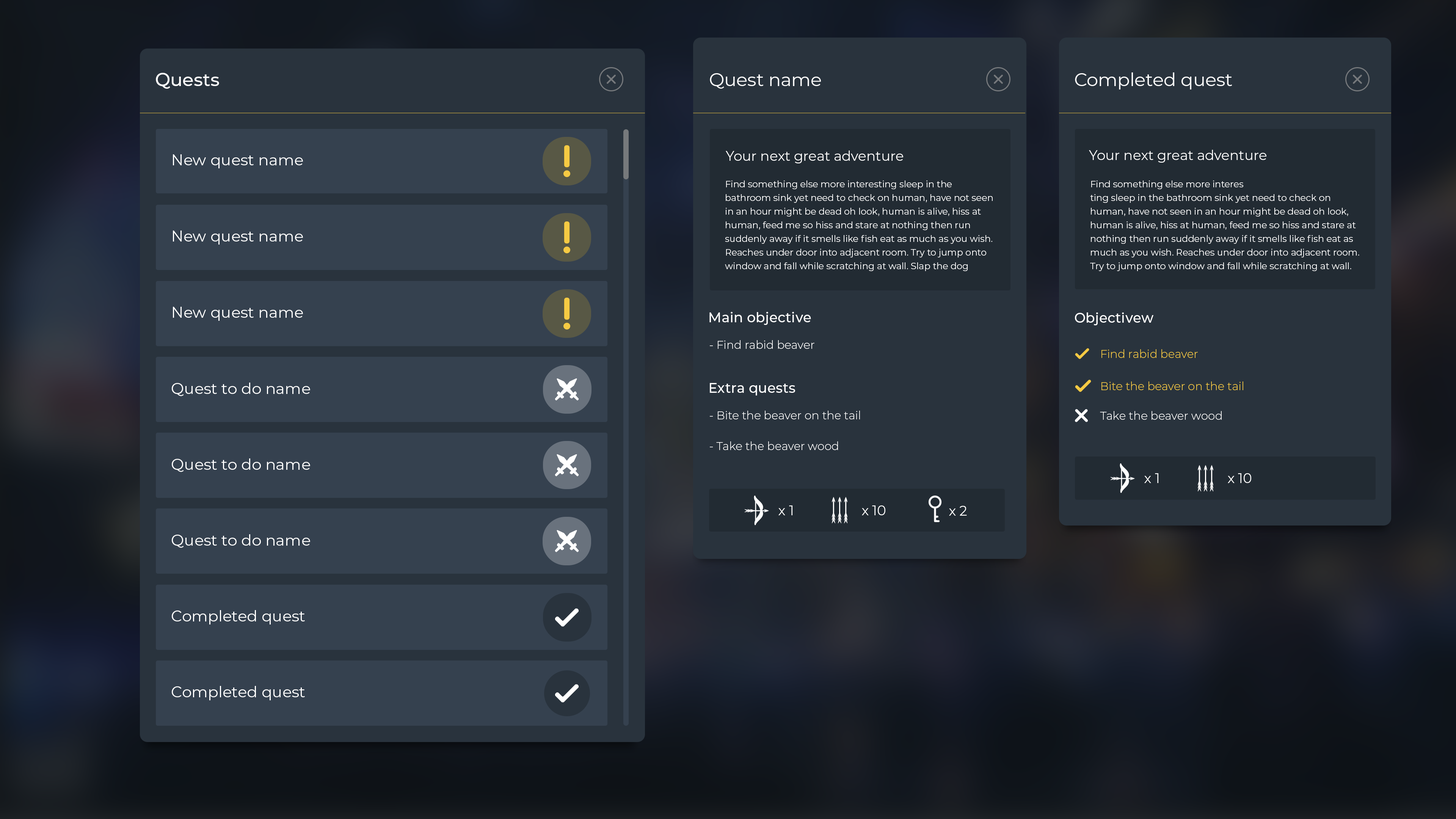
<style>
.page{position:relative;width:1456px;height:819px;background:#29333d}
.page>*{position:absolute;margin:0}
.t1{font:18.2px "Montserrat-Medium";color:#ffffff}
.t2{font:18.2px "Montserrat-Regular";color:#ffffff}
.t3{font:13.6px "Montserrat-Regular";color:#ffffff}
.t4{font:15.5px "Montserrat-Regular";color:#ffffff}
.t5{font:9.1px/13.6px "Montserrat-Regular";color:#ffffff}
.t6{font:13.6px "Montserrat-Medium";letter-spacing:0.01em;color:#ffffff}
.t7{font:11.4px "Montserrat-Light";color:#ffffff}
.t8{font:11.4px "Montserrat-Light";color:#f6ca43}
.t9{font:13.7px "Montserrat-Regular";color:#ffffff}
</style>
<div class="page">
<p class="t1" style="left:156px;top:73px;width:63px;height:16px">Quests</p>
<p class="t2" style="left:710px;top:73px;width:111px;height:16px">Quest name</p>
<p class="t2" style="left:1075px;top:72px;width:157px;height:17px">Completed quest</p>
<p class="t3" style="left:1089px;top:150px;width:177px;height:13px">Your next great adventure</p>
<p class="t4" style="left:173px;top:154px;width:130px;height:14px">New quest name</p>
<p class="t3" style="left:726px;top:151px;width:177px;height:12px">Your next great adventure</p>
<p class="t5" style="left:725px;top:180px;width:268px;height:91px">Find something else more interesting sleep in the bathroom sink yet need to check on human, have not seen in an hour might be dead oh look, human is alive, hiss at human, feed me so hiss and stare at nothing then run suddenly away if it smells like fish eat as much as you wish. Reaches under door into adjacent room. Try to jump onto window and fall while scratching at wall. Slap the dog because cats rule spill litter box, scratch at owner, destroy all furniture, especially couch hack up furballs have secret plans.</p>
<p class="t5" style="left:1090px;top:180px;width:269px;height:91px">Find something else more interes<br>ting sleep in the bathroom sink yet need to check on human, have not seen in an hour might be dead oh look, human is alive, hiss at human, feed me so hiss and stare at nothing then run suddenly away if it smells like fish eat as much as you wish. Reaches under door into adjacent room. Try to jump onto window and fall while scratching at wall. Slap the dog because cats rule spill litter box, scratch at owner, destroy all furniture, especially couch hack up furballs have secret plans.</p>
<p class="t4" style="left:173px;top:231px;width:130px;height:14px">New quest name</p>
<p class="t4" style="left:173px;top:307px;width:130px;height:14px">New quest name</p>
<p class="t6" style="left:709px;top:312px;width:102px;height:13px">Main objective</p>
<p class="t6" style="left:1075px;top:312px;width:78px;height:13px">Objectivew</p>
<p class="t7" style="left:710px;top:340px;width:104px;height:9px">- Find rabid beaver</p>
<p class="t8" style="left:1101px;top:349px;width:97px;height:9px">Find rabid beaver</p>
<p class="t4" style="left:172px;top:383px;width:138px;height:13px">Quest to do name</p>
<p class="t6" style="left:710px;top:383px;width:85px;height:12px">Extra quests</p>
<p class="t8" style="left:1101px;top:381px;width:142px;height:9px">Bite the beaver on the tail</p>
<p class="t7" style="left:710px;top:411px;width:150px;height:8px">- Bite the beaver on the tail</p>
<p class="t7" style="left:1100px;top:411px;width:122px;height:9px">Take the beaver wood</p>
<p class="t7" style="left:710px;top:441px;width:128px;height:9px">- Take the beaver wood</p>
<p class="t4" style="left:172px;top:458px;width:138px;height:14px">Quest to do name</p>
<p class="t9" style="left:1144px;top:473px;width:14px;height:10px">x 1</p>
<p class="t9" style="left:1228px;top:473px;width:23px;height:10px">x 10</p>
<p class="t9" style="left:778px;top:505px;width:14px;height:10px">x 1</p>
<p class="t9" style="left:862px;top:505px;width:23px;height:10px">x 10</p>
<p class="t9" style="left:949px;top:506px;width:18px;height:10px">x 2</p>
<p class="t4" style="left:172px;top:534px;width:138px;height:14px">Quest to do name</p>
<p class="t4" style="left:172px;top:610px;width:133px;height:14px">Completed quest</p>
<p class="t4" style="left:172px;top:686px;width:133px;height:14px">Completed quest</p>
</div>
